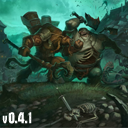
<style>
.page{position:relative;width:128px;height:128px}
.page>*{position:absolute;margin:0}
.t1{font:17px "Gustav-Black";color:#ffffff}
.t2{font:13px "Gustav-Black";color:#ffffff}
</style>
<div class="page">
<p class="t1" style="left:8px;top:112px;width:24px;height:12px">0.4.1</p>
<p class="t2" style="left:2px;top:115px;width:5px;height:9px">v</p>
</div>
